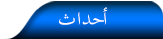
<style>
.page{position:relative;width:163px;height:39px;background:#ffffff}
.page>*{position:absolute;margin:0}
.t1{font:26px "TraditionalArabic";letter-spacing:-0.08em;color:#fefdfd}
</style>
<div class="page">
<p class="t1" style="left:59px;top:7px;width:49px;height:18px">أحد ا ث</p>
</div>
